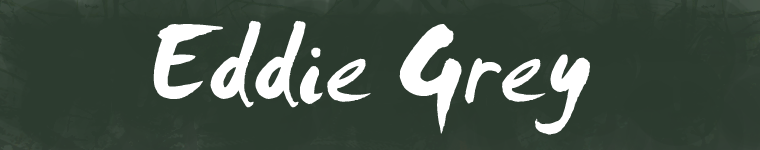
<style>
.page{position:relative;width:760px;height:150px;background:#2c3b2f}
.page>*{position:absolute;margin:0}
.t1{font:116px "SmudgerLetPlain";color:#ffffff}
</style>
<div class="page">
<p class="t1" style="left:153px;top:20px;width:437px;height:115px">Eddie Grey</p>
</div>
